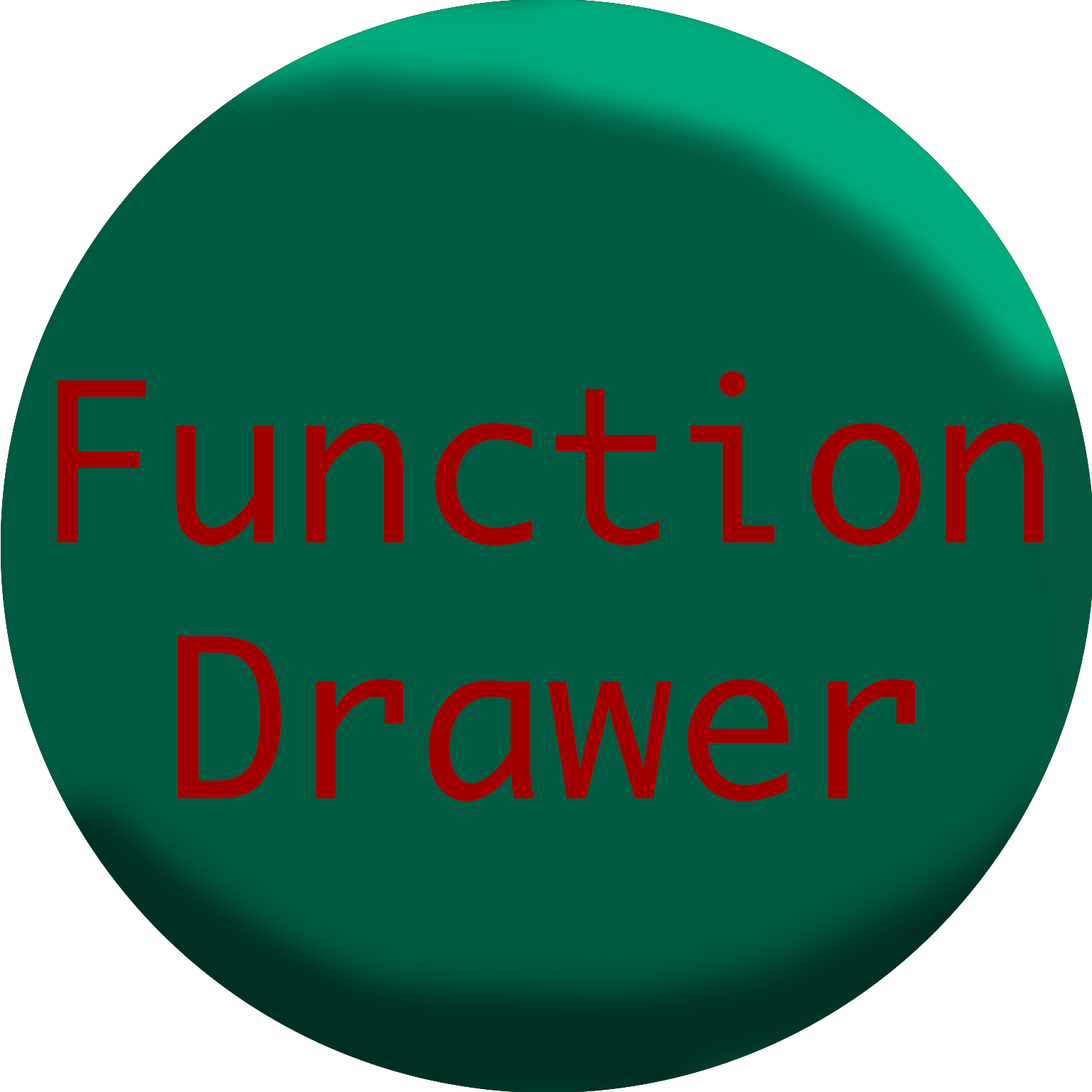
<style>
.page{position:relative;width:1092px;height:1092px;background:#005941}
.page>*{position:absolute;margin:0}
.t1{font:213.3px "Monaco";color:#a00000}
</style>
<div class="page">
<p class="t1" style="left:57px;top:371px;width:987px;height:430px;text-align:center">Function<br>Drawer</p>
</div>
